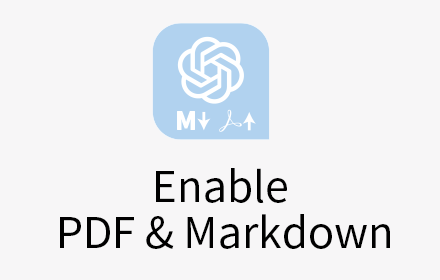
<style>
.page{position:relative;width:440px;height:280px;background:#f7f6f7}
.page>*{position:absolute;margin:0}
.t1{font:10.2px/46px "SourceHanSansCN-Regular";color:#000000}
</style>
<div class="page">
<p class="t1" style="left:60px;top:168px;width:330px;height:81px;text-align:center">Enable <br>PDF &amp; Markdown</p>
</div>
